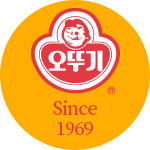
<style>
.page{position:relative;width:150px;height:150px;background:#ffae00}
.page>*{position:absolute;margin:0}
.t1{font:18px/20px "NotoSerifKR-SemiBold";letter-spacing:-0.05em;color:#e2383f}
</style>
<div class="page">
<p class="t1" style="left:53px;top:100px;width:44px;height:36px;text-align:center">Since<br>1969</p>
</div>
